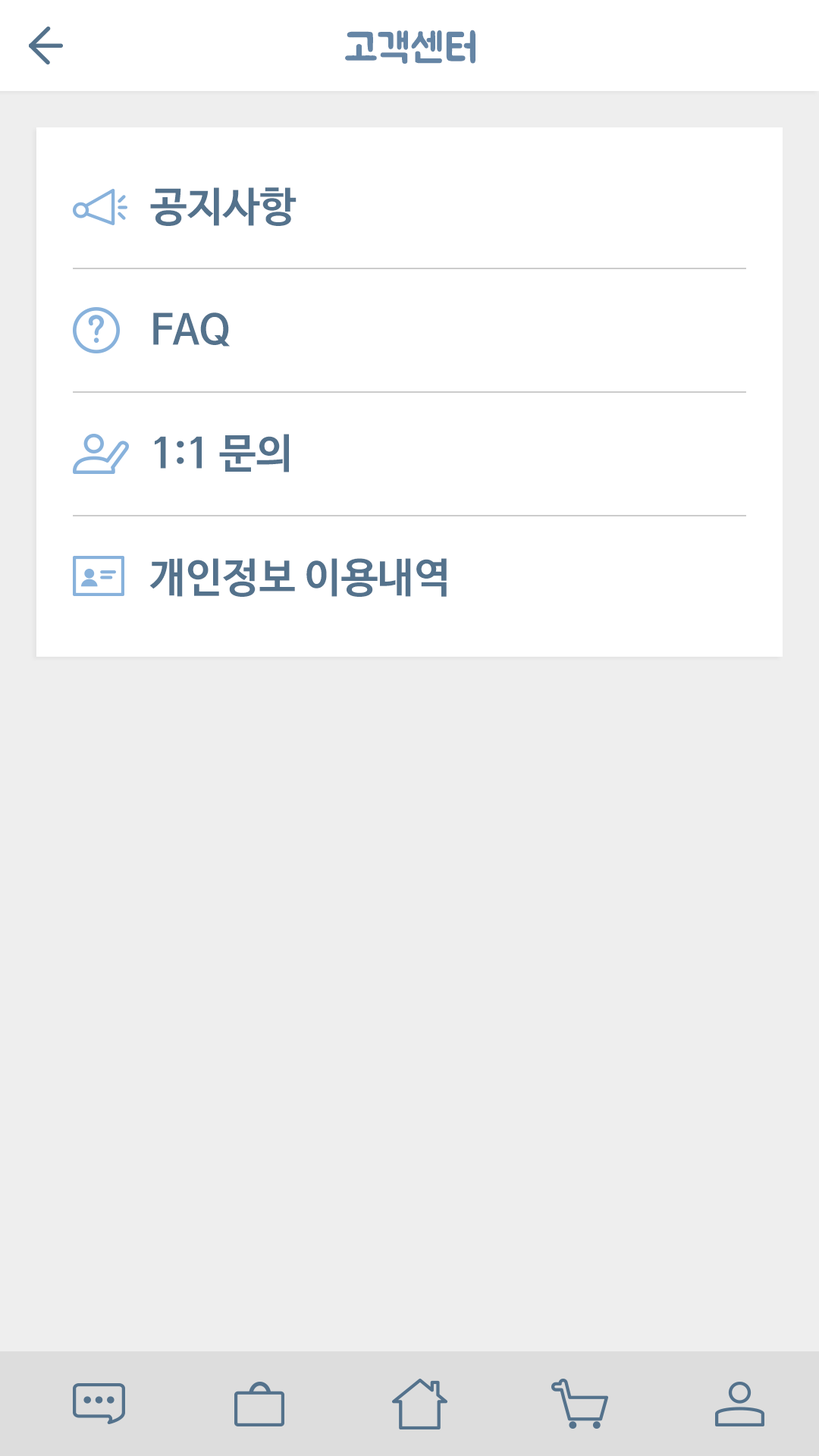
<style>
.page{position:relative;width:819px;height:1456px;background:#eeeeee}
.page>*{position:absolute;margin:0}
.t1{font:40.9px "BMJUA";color:#6585a5}
.t2{font:40.9px "NanumBarunGothicBold";color:#54728c}
</style>
<div class="page">
<p class="t1" style="left:345px;top:30px;width:130px;height:34px">고객센터</p>
<p class="t2" style="left:150px;top:187px;width:147px;height:39px">공지사항</p>
<p class="t2" style="left:153px;top:312px;width:77px;height:35px">FAQ</p>
<p class="t2" style="left:155px;top:434px;width:134px;height:38px">1:1 문의</p>
<p class="t2" style="left:149px;top:558px;width:298px;height:39px">개인정보 이용내역</p>
</div>
